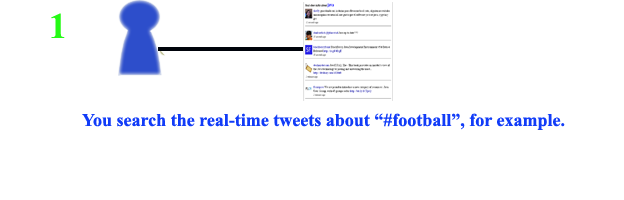
<style>
.page{position:relative;width:624px;height:200px;background:#ffffff}
.page>*{position:absolute;margin:0}
.t1{font:18px "TimesNewRomanPS-BoldMT";color:#113cf8}
</style>
<div class="page">
<p class="t1" style="left:82px;top:113px;width:483px;height:17px">You search the real-time tweets about “#football”, for example.</p>
</div>
